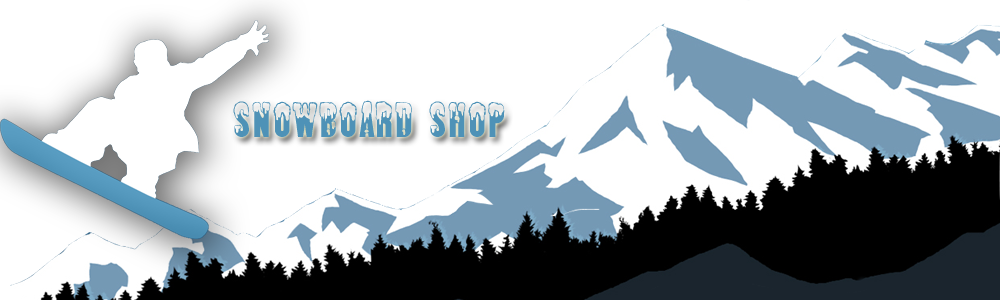
<style>
.page{position:relative;width:1000px;height:300px;background:#ffffff}
.page>*{position:absolute;margin:0}
.t1{font:40px "AlmonteSnow-Regular";color:#4e92b7}
</style>
<div class="page">
<p class="t1" style="left:233px;top:100px;width:272px;height:37px">Snowboard Shop</p>
</div>
